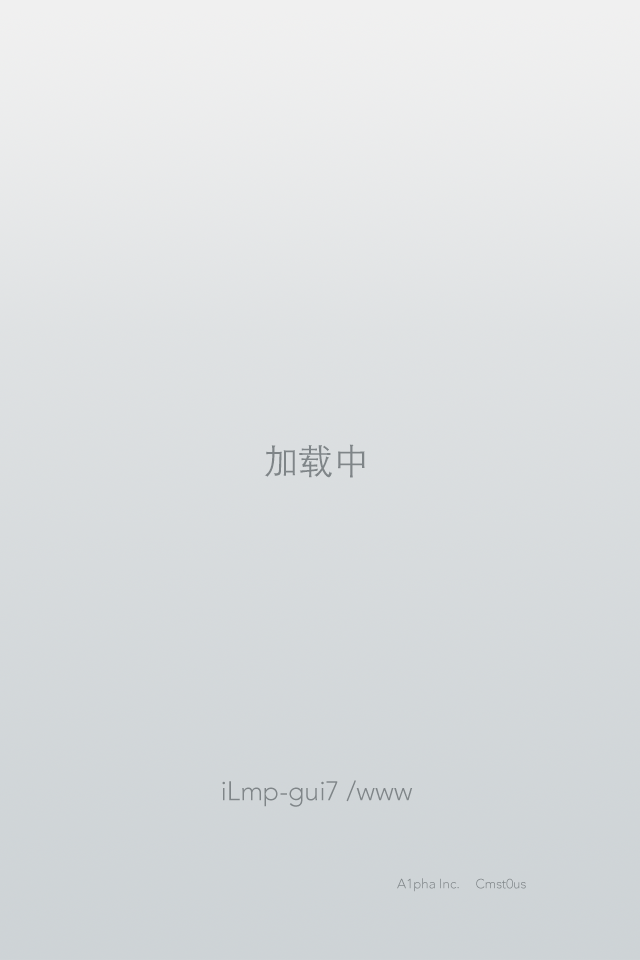
<style>
.page{position:relative;width:640px;height:960px}
.page>*{position:absolute;margin:0}
.t1{font:35.6px "STHeitiSC-Light";color:#7f8588}
.t2{font:26.7px "Avenir-Light";color:#7f8588}
.t3{font:13.3px "Avenir-Light";color:#7f8588}
</style>
<div class="page">
<p class="t1" style="left:264px;top:444px;width:101px;height:34px">加载中</p>
<p class="t2" style="left:222px;top:780px;width:191px;height:27px">iLmp-gui7 /www</p>
<p class="t3" style="left:397px;top:878px;width:62px;height:14px">A1pha Inc.</p>
<p class="t3" style="left:476px;top:878px;width:50px;height:11px">Cmst0us</p>
</div>
